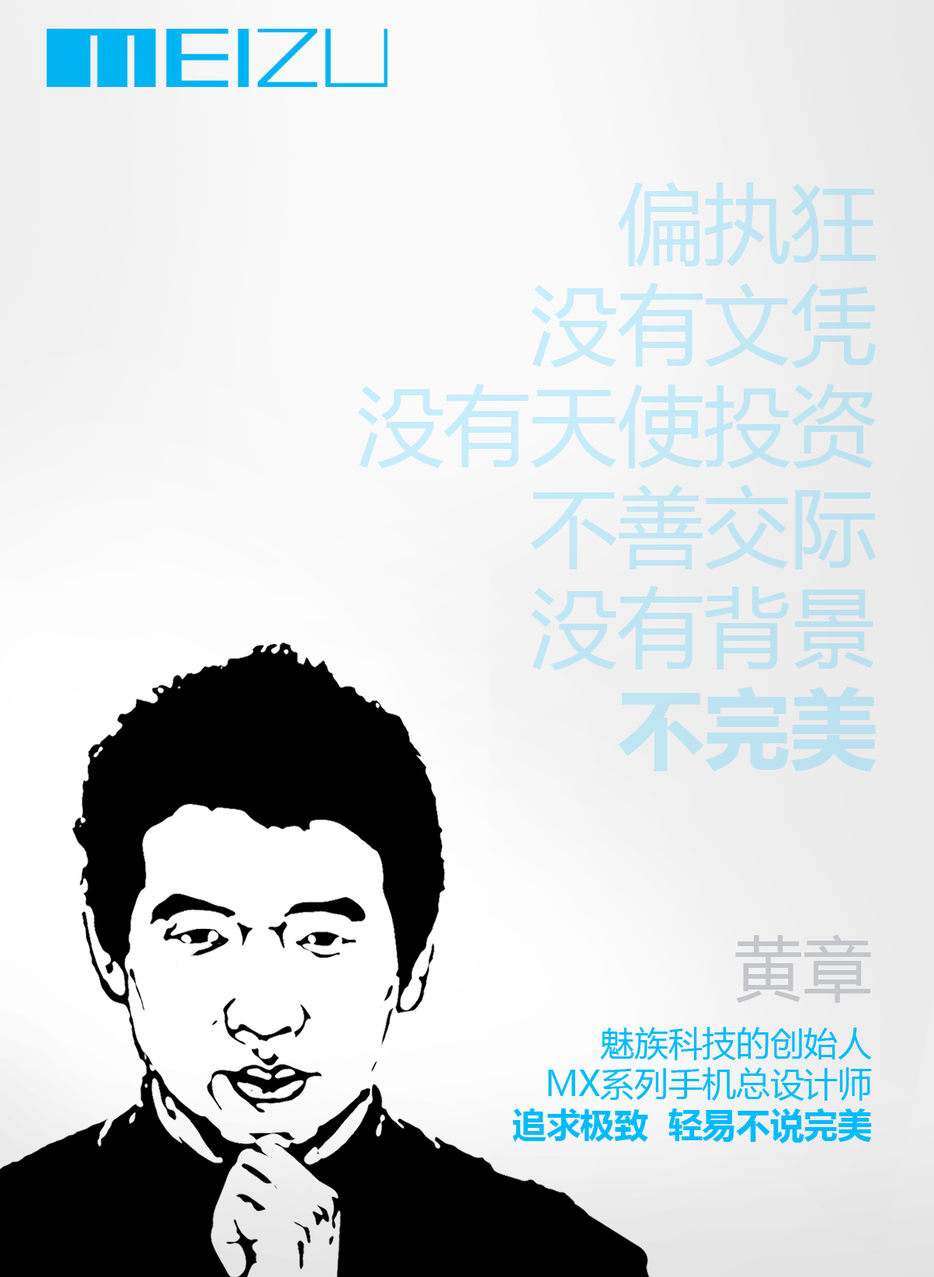
<style>
.page{position:relative;width:934px;height:1277px}
.page>*{position:absolute;margin:0}
.t1{font:86.7px/100.9px "MicrosoftYaHei";color:#c0e5f2}
.t2{font:86.7px/100.9px "MicrosoftYaHei-Bold";color:#c0e5f2}
.t3{font:68.8px "MicrosoftYaHei";color:#c3c6ca}
.t4{font:33.9px "MicrosoftYaHei";color:#00bbfb}
.t5{font:33.9px "MicrosoftYaHei-Bold";color:#00bbfb}
</style>
<div class="page">
<p class="t1" style="left:358px;top:182px;width:519px;height:589px;text-align:right">偏执狂<br>没有文凭<br>没有天使投资<br>不善交际<br>没有背景<br><span class="t2">不完美</span></p>
<p class="t3" style="left:735px;top:934px;width:136px;height:68px">黄章</p>
<p class="t4" style="left:512px;top:1027px;width:360px;height:116px;text-align:right">魅族科技的创始人<br>MX系列手机总设计师<br><span class="t5">追求极致  轻易不说完美</span></p>
</div>
